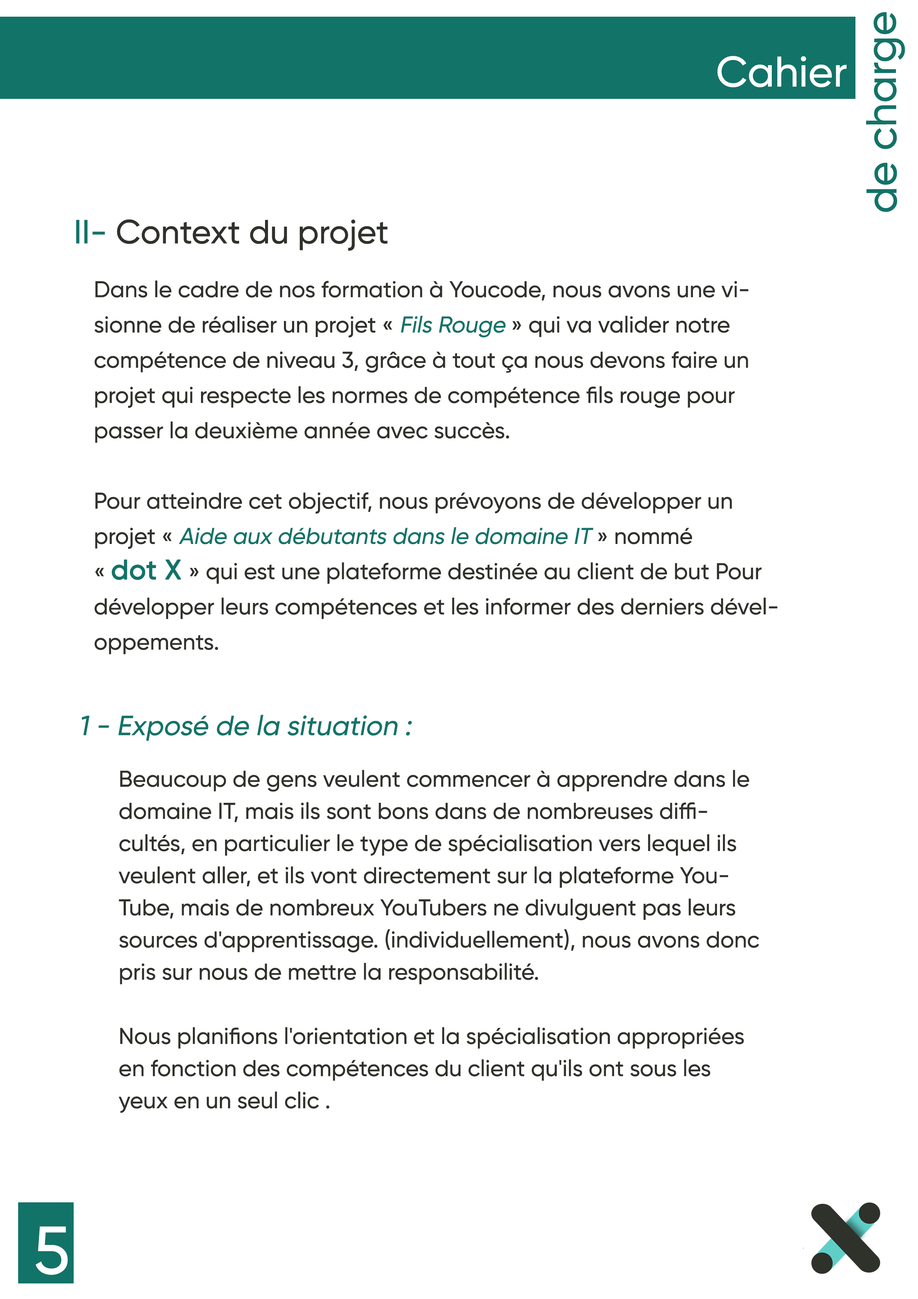
<style>
.page{position:relative;width:918px;height:1299px;background:#ffffff}
.page>*{position:absolute;margin:0}
.t1{font:42.9px "Gilroy-Medium";color:#127368}
.t2{font:42.9px "Gilroy-Medium";color:#ffffff}
.t3{font:33.7px "Gilroy-Medium";color:#2f312b}
.t4{font:33.7px "Gilroy-Medium";color:#127368}
.t5{font:22.9px/35.2px "Gilroy-Medium";color:#2f312b}
.t6{font:22.9px/35.2px "Gilroy-Medium";color:#127368;font-style:italic}
.t7{font:27.5px/35.2px "Gilroy-Medium";color:#127368;font-weight:bold}
.t8{font:27.8px "Gilroy-Medium";color:#127368;font-style:italic}
.t9{font:22.9px/32.1px "Gilroy-Medium";color:#2f312b}
.t10{font:67.6px "Gilroy-Medium";color:#ffffff}
</style>
<div class="page">
<p class="t1" style="left:866px;top:12px;width:39px;height:200px;rotate:-90deg">de charge</p>
<p class="t2" style="left:717px;top:56px;width:130px;height:31px">Cahier</p>
<p class="t3" style="left:76px;top:219px;width:312px;height:32px"><span class="t4">II-</span> Context du projet</p>
<p class="t5" style="left:94px;top:280px;width:683px;height:374px">Dans le cadre de nos formation à Youcode, nous avons une visionne de réaliser un projet « <span class="t6">Fils Rouge</span> » qui va valider notre compétence de niveau 3, grâce à tout ça nous devons faire un projet qui respecte les normes de compétence fils rouge pour passer la deuxième année avec succès.<br><br>Pour atteindre cet objectif, nous prévoyons de développer un projet « <span class="t6">Aide aux débutants dans le domaine IT</span> » nommé <br>« <span class="t7">dot X </span>» qui est une plateforme destinée au client de but Pour développer leurs compétences et les informer des derniers développements.</p>
<p class="t8" style="left:81px;top:715px;width:331px;height:26px">1 - Exposé de la situation :</p>
<p class="t9" style="left:118px;top:770px;width:641px;height:343px">Beaucoup de gens veulent commencer à apprendre dans le domaine IT, mais ils sont bons dans de nombreuses difficultés, en particulier le type de spécialisation vers lequel ils veulent aller, et ils vont directement sur la plateforme YouTube, mais de nombreux YouTubers ne divulguent pas leurs sources d'apprentissage. (individuellement), nous avons donc pris sur nous de mettre la responsabilité.<br><br>Nous planifions l'orientation et la spécialisation appropriées en fonction des compétences du client qu'ils ont sous les yeux en un seul clic .</p>
<p class="t10" style="left:36px;top:1226px;width:32px;height:49px">5</p>
</div>
